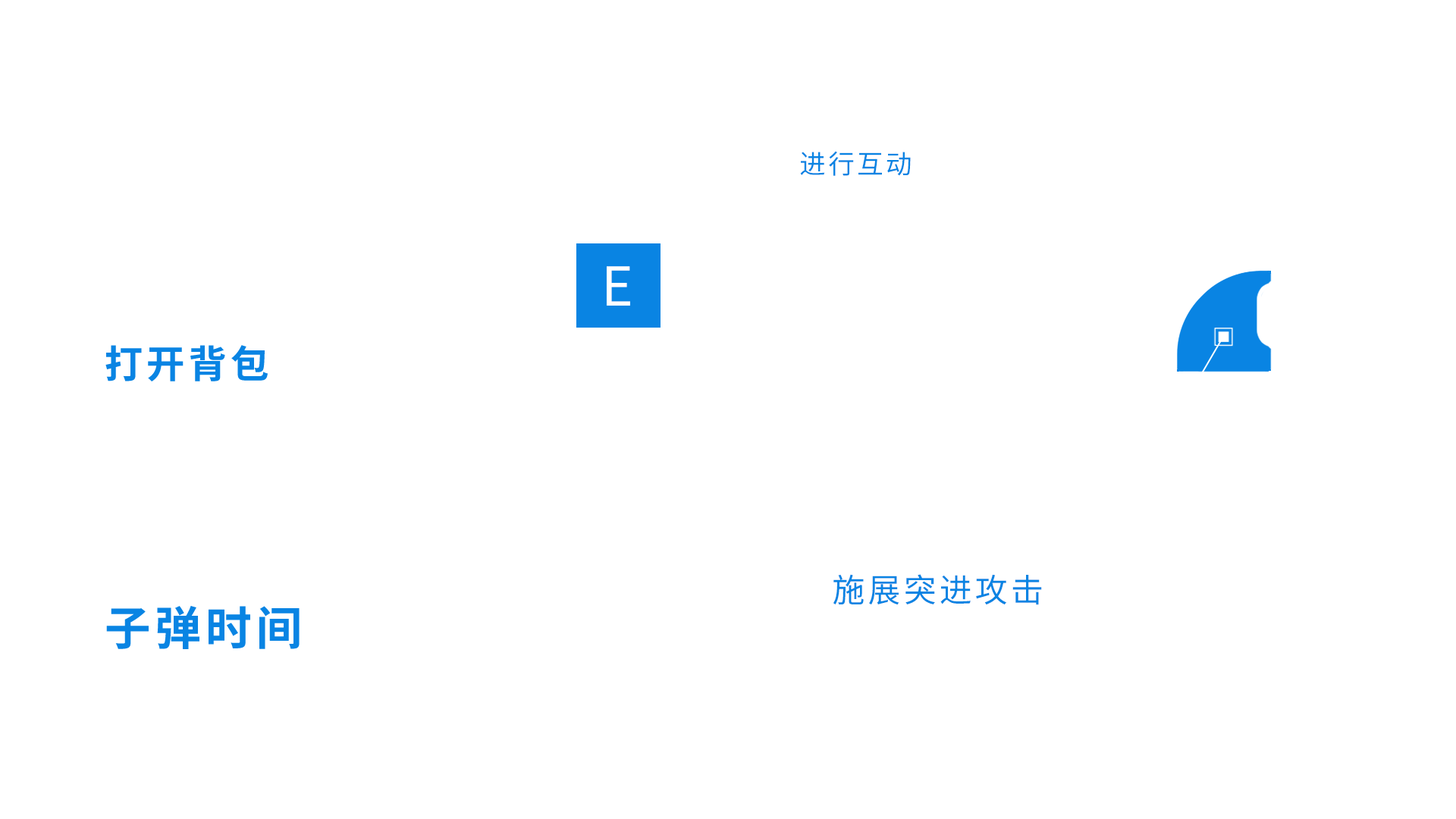
<style>
.page{position:relative;width:1456px;height:819px;background:#ffffff}
.page>*{position:absolute;margin:0}
.t1{font:26.2px "SourceHanSansSC-Regular";letter-spacing:0.1em;color:#0984e3}
.t2{font:53.4px "SourceHanSansSC-Regular";letter-spacing:0.1em;color:#ffffff}
.t3{font:38.2px "SourceHanSansSC-Bold";letter-spacing:0.1em;color:#0984e3}
.t4{font:32.5px "SourceHanSansSC-Regular";letter-spacing:0.1em;color:#0984e3}
.t5{font:46px "SourceHanSansSC-Bold";letter-spacing:0.1em;color:#0984e3}
</style>
<div class="page">
<p class="t1" style="left:800px;top:151px;width:111px;height:25px">进行互动</p>
<p class="t2" style="left:607px;top:266px;width:23px;height:40px">E</p>
<p class="t3" style="left:105px;top:345px;width:163px;height:36px">打开背包</p>
<p class="t4" style="left:833px;top:574px;width:209px;height:31px">施展突进攻击</p>
<p class="t5" style="left:106px;top:606px;width:194px;height:43px">子弹时间</p>
</div>
